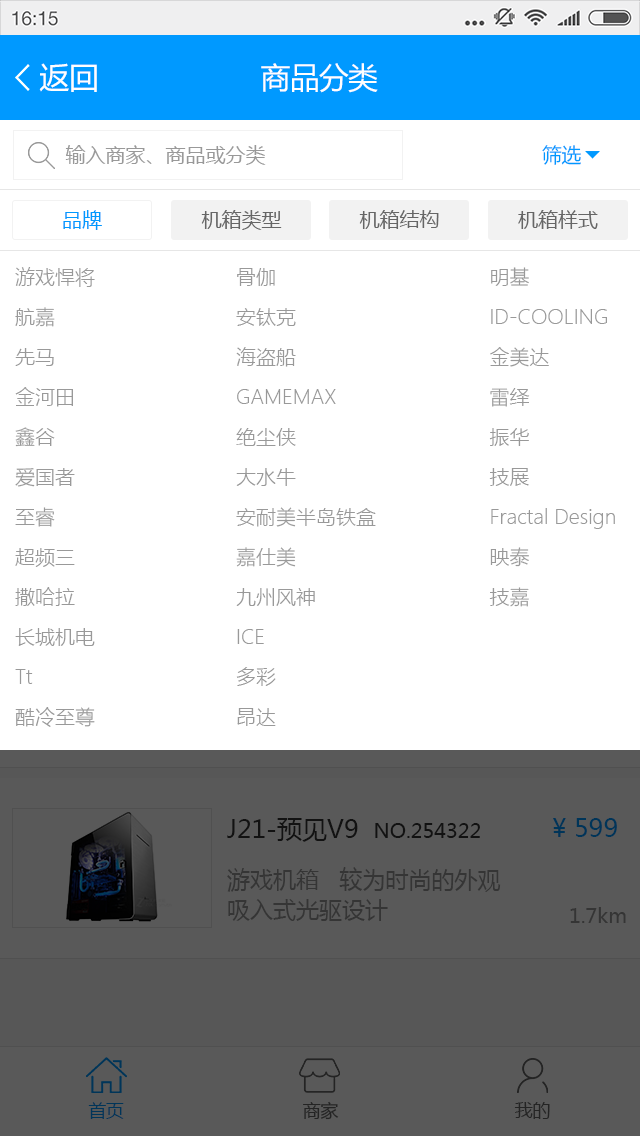
<style>
.page{position:relative;width:640px;height:1136px;background:#ffffff}
.page>*{position:absolute;margin:0}
.t1{font:30px "MicrosoftYaHei";letter-spacing:-0.02em;color:#fefefe}
.t2{font:20px "MicrosoftYaHei";color:#999999}
.t3{font:20px "MicrosoftYaHei";letter-spacing:-0.02em;color:#0099ff}
.t4{font:20px "MicrosoftYaHei";color:#0099ff}
.t5{font:20px "MicrosoftYaHei";color:#666666}
.t6{font:20px/40px "MicrosoftYaHeiLight";color:#999999}
.t7{font:20px "MicrosoftYaHei";color:#121212}
.t8{font:25px "MicrosoftYaHei";color:#121212}
.t9{font:25px "MicrosoftYaHei";color:#003559}
.t10{font:23px/30px "MicrosoftYaHei";color:#353535}
.t11{font:20px "MicrosoftYaHei";color:#353535}
.t12{font:18px "MicrosoftYaHei";letter-spacing:-0.02em;color:#003559}
.t13{font:18px "MicrosoftYaHei";letter-spacing:-0.02em;color:#242424}
</style>
<div class="page">
<p class="t1" style="left:39px;top:63px;width:58px;height:29px">返回</p>
<p class="t1" style="left:261px;top:63px;width:117px;height:30px">商品分类</p>
<p class="t2" style="left:65px;top:145px;width:201px;height:20px">输入商家、商品或分类</p>
<p class="t3" style="left:542px;top:145px;width:39px;height:20px">筛选</p>
<p class="t4" style="left:63px;top:210px;width:39px;height:20px">品牌</p>
<p class="t5" style="left:201px;top:210px;width:81px;height:20px">机箱类型</p>
<p class="t5" style="left:359px;top:210px;width:80px;height:19px">机箱结构</p>
<p class="t5" style="left:518px;top:210px;width:80px;height:19px">机箱样式</p>
<p class="t6" style="left:15px;top:267px;width:80px;height:460px">游戏悍将<br>航嘉<br>先马<br>金河田<br>鑫谷<br>爱国者<br>至睿<br>超频三<br>撒哈拉<br>长城机电<br>Tt<br>酷冷至尊</p>
<p class="t6" style="left:236px;top:268px;width:140px;height:458px">骨伽<br>安钛克<br>海盗船<br>GAMEMAX<br>绝尘侠<br>大水牛<br>安耐美半岛铁盒<br>嘉仕美<br>九州风神<br>ICE<br>多彩<br>昂达</p>
<p class="t6" style="left:489px;top:267px;width:126px;height:340px">明基<br>ID-COOLING<br>金美达<br>雷绎<br>振华<br>技展<br>Fractal Design<br>映泰<br>技嘉</p>
<p class="t7" style="left:227px;top:818px;width:253px;height:24px"><span class="t8">J21-预见V9  </span>NO.254322</p>
<p class="t9" style="left:553px;top:818px;width:64px;height:19px">¥ 599</p>
<p class="t10" style="left:227px;top:867px;width:274px;height:54px">游戏机箱   较为时尚的外观   <br>吸入式光驱设计</p>
<p class="t11" style="left:570px;top:907px;width:56px;height:16px">1.7km</p>
<p class="t12" style="left:88px;top:1102px;width:36px;height:17px">首页</p>
<p class="t13" style="left:303px;top:1101px;width:36px;height:19px">商家</p>
<p class="t13" style="left:514px;top:1102px;width:36px;height:17px">我的</p>
</div>
